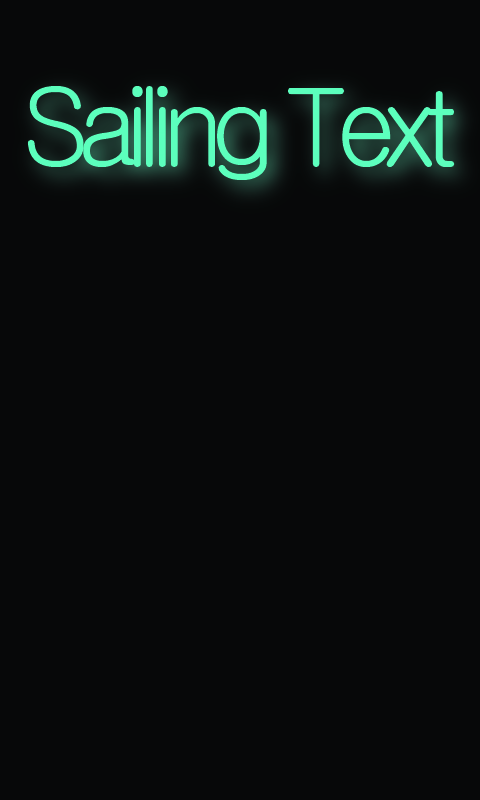
<style>
.page{position:relative;width:480px;height:800px;background:#070809}
.page>*{position:absolute;margin:0}
.t1{font:107.1px "Gulim";letter-spacing:-0.12em;color:#5cffbd}
</style>
<div class="page">
<p class="t1" style="left:27px;top:86px;width:428px;height:94px">Sailing Text</p>
</div>
